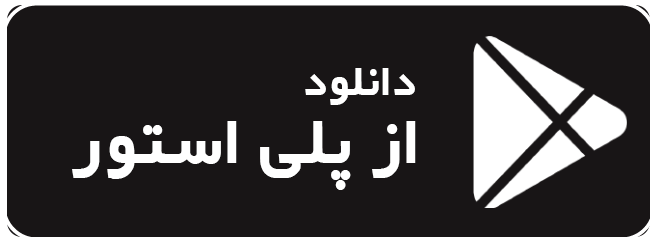
<style>
.page{position:relative;width:658px;height:243px;background:#181516}
.page>*{position:absolute;margin:0}
.t1{font:37.5px "IRYekan-Bold";color:#ffffff}
.t2{font:58.3px "IRYekan-Bold";color:#ffffff}
</style>
<div class="page">
<p class="t1" style="left:305px;top:68px;width:110px;height:37px">دانلود</p>
<p class="t2" style="left:72px;top:121px;width:344px;height:69px">از پلی استور</p>
</div>
